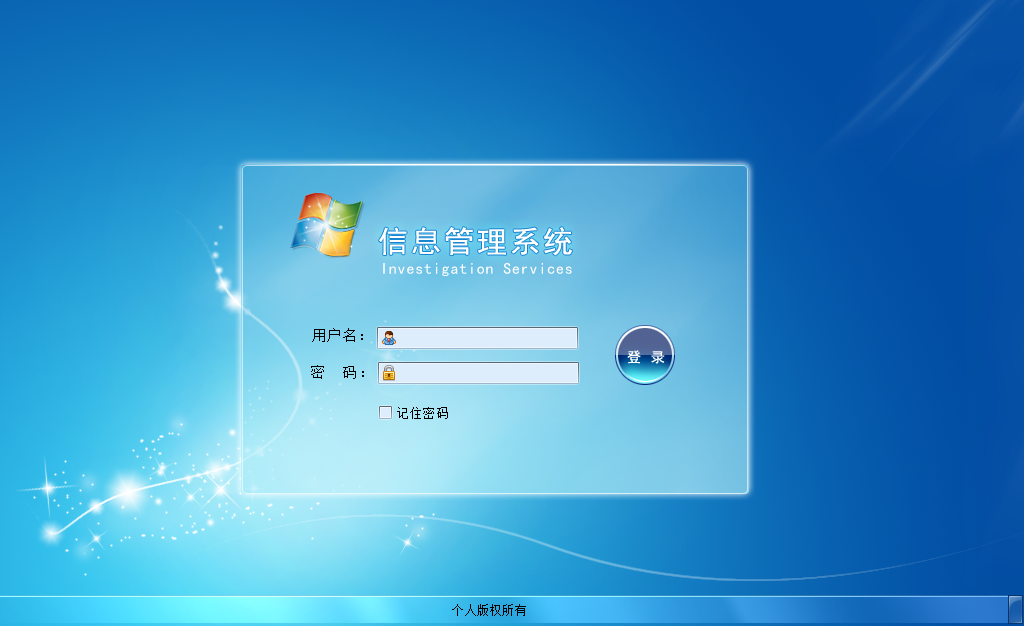
<style>
.page{position:relative;width:1024px;height:626px}
.page>*{position:absolute;margin:0}
.t1{font:30px "SimHei";letter-spacing:0.1em;color:#ffffff}
.t2{font:16px "SimHei";letter-spacing:0.05em;color:#ffffff}
.t3{font:14px "SimSun";letter-spacing:0.1em;color:#000000}
.t4{font:14px "SimHei";letter-spacing:0.1em;color:#ffffff}
.t5{font:12px "SimSun";letter-spacing:0.1em;color:#000000}
.t6{font:12px "SimSun";letter-spacing:0.05em;color:#000000}
</style>
<div class="page">
<p class="t1" style="left:379px;top:227px;width:193px;height:29px">信息管理系统</p>
<p class="t2" style="left:383px;top:262px;width:189px;height:14px">Investigation Services</p>
<p class="t3" style="left:312px;top:328px;width:51px;height:14px">用户名：</p>
<p class="t4" style="left:627px;top:350px;width:38px;height:14px">登 录</p>
<p class="t3" style="left:311px;top:365px;width:53px;height:14px">密  码：</p>
<p class="t5" style="left:397px;top:407px;width:51px;height:12px">记住密码</p>
<p class="t6" style="left:452px;top:604px;width:74px;height:12px">个人版权所有</p>
</div>
